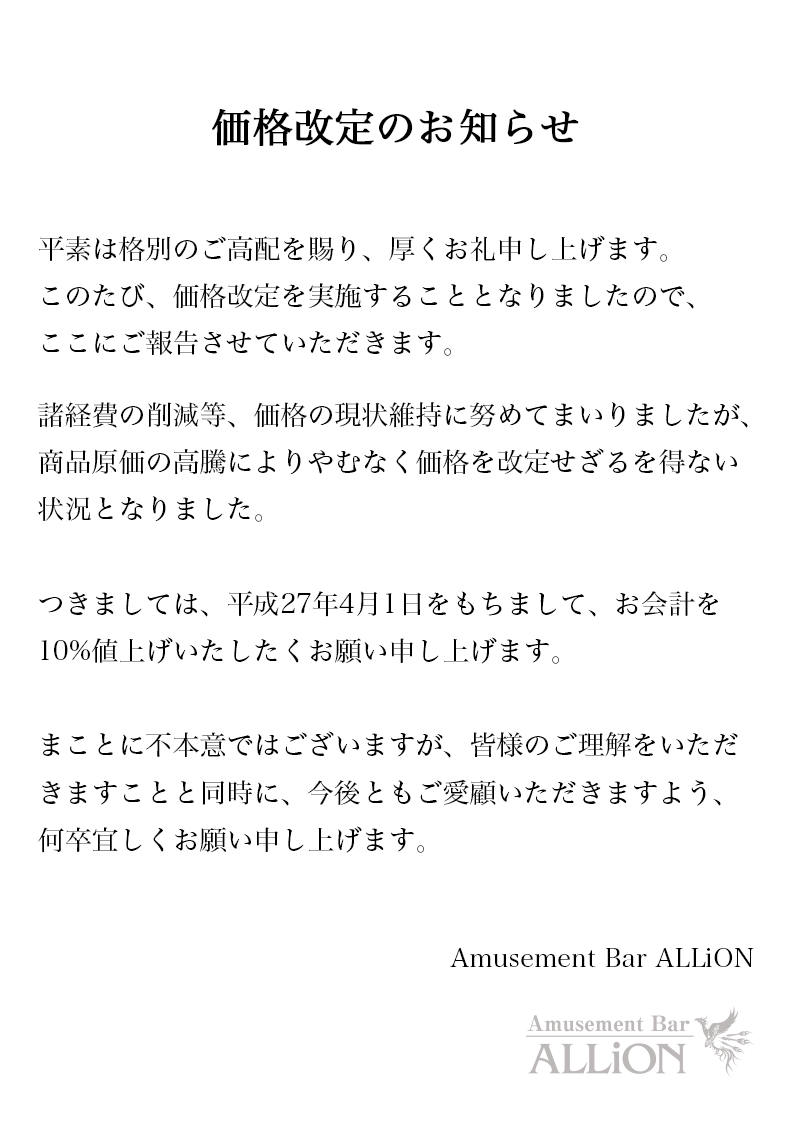
<style>
.page{position:relative;width:794px;height:1123px;background:#ffffff}
.page>*{position:absolute;margin:0}
.t1{font:40px "HiraMinPro-W3";color:#000000;font-weight:bold}
.t2{font:27px "HiraMinPro-W3";color:#000000}
.t3{font:27px/24px "HiraMinPro-W3";color:#000000}
.t4{font:26px "HiraMinPro-W3";color:#000000}
</style>
<div class="page">
<p class="t1" style="left:212px;top:108px;width:367px;height:38px">価格改定のお知らせ</p>
<p class="t2" style="left:38px;top:235px;width:710px;height:618px">平素は格別のご高配を賜り、厚くお礼申し上げます。<br>このたび、価格改定を実施することとなりましたので、<br><span class="t3">ここにご報告させていただきます。<br><br></span>諸経費の削減等、価格の現状維持に努めてまいりましたが、<br>商品原価の高騰によりやむなく価格を改定せざるを得ない<br>状況<span class="t3">となりました。<br></span><br>つきましては、平成27年4月1日をもちまして、お会計を<br>10%<span class="t3">値上げいたしたくお願い申し上げます。<br></span><br>まことに不本意ではございますが、皆様のご理解をいただ<br>きますことと同時に、今後ともご愛顧いただきますよう、<br>何卒宜しくお願い申し上げます。</p>
<p class="t4" style="left:450px;top:948px;width:304px;height:19px">Amusement Bar ALLiON</p>
</div>
